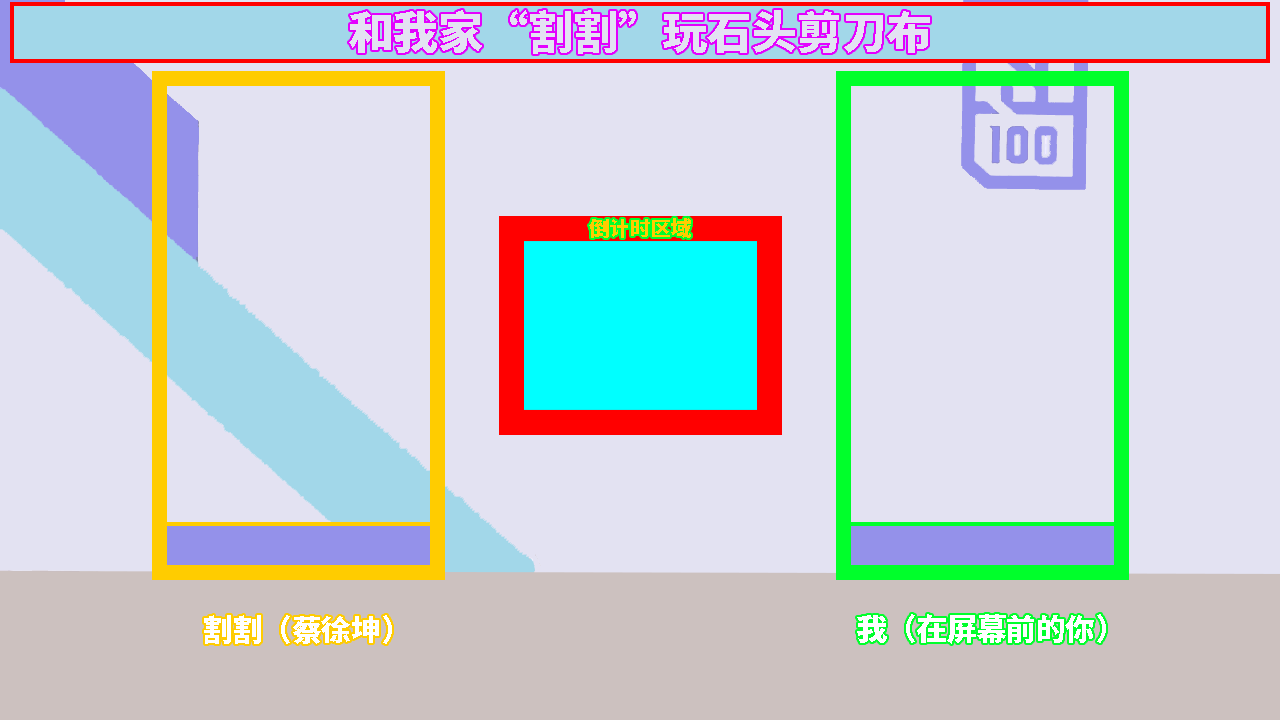
<style>
.page{position:relative;width:1280px;height:720px;background:#e3e2f2}
.page>*{position:absolute;margin:0}
.t1{font:44.8px "NotoSansHans-Black";color:#e3e2f2}
.t2{font:20.5px "NotoSansHans-Black";color:#ffcc00}
.t3{font:29.9px "NotoSansHans-Black";color:#ffffff}
</style>
<div class="page">
<p class="t1" style="left:349px;top:10px;width:581px;height:44px">和我家“割割”玩石头剪刀布</p>
<p class="t2" style="left:589px;top:218px;width:102px;height:20px">倒计时区域</p>
<p class="t3" style="left:204px;top:615px;width:188px;height:29px">割割（蔡徐坤）</p>
<p class="t3" style="left:857px;top:614px;width:249px;height:30px">我（在屏幕前的你）</p>
</div>
